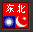
<style>
.page{position:relative;width:33px;height:32px;background:#f20000}
.page>*{position:absolute;margin:0}
.t1{font:10.4px "SimSun";color:#ffffff}
</style>
<div class="page">
<p class="t1" style="left:6px;top:4px;width:19px;height:9px">东北</p>
</div>
